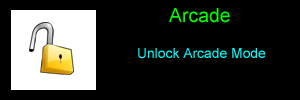
<style>
.page{position:relative;width:300px;height:100px;background:#000000}
.page>*{position:absolute;margin:0}
.t1{font:19.4px "ArialMT";color:#00ff00}
.t2{font:13.9px "ArialMT";color:#00ffff}
</style>
<div class="page">
<p class="t1" style="left:169px;top:8px;width:61px;height:15px">Arcade</p>
<p class="t2" style="left:138px;top:48px;width:128px;height:11px">Unlock Arcade Mode</p>
</div>
